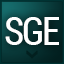
<style>
.page{position:relative;width:64px;height:64px}
.page>*{position:absolute;margin:0}
.t1{font:37.5px "Roboto-Condensed";letter-spacing:-0.05em;color:#ffffff}
</style>
<div class="page">
<p class="t1" style="left:5px;top:17px;width:54px;height:28px">SGE</p>
</div>
